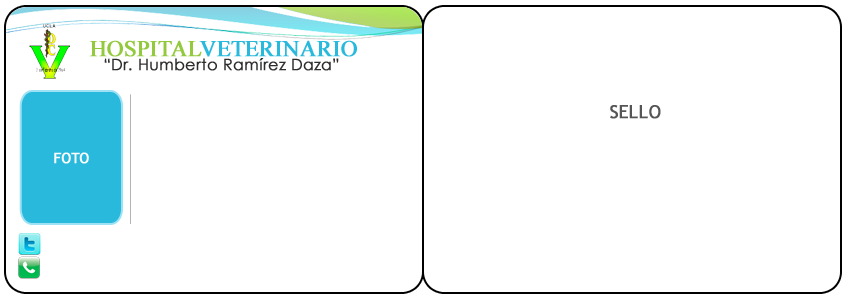
<style>
.page{position:relative;width:848px;height:299px;background:#ffffff}
.page>*{position:absolute;margin:0}
.t1{font:22.7px "TimesNewRomanPSMT";color:#29b9dd;font-weight:bold}
.t2{font:22.7px "TimesNewRomanPSMT";color:#93c93d;font-weight:bold}
.t3{font:15.6px "CenturyGothic";color:#2e2e2e;font-weight:bold}
.t4{font:18px "TrebuchetMS";color:#555555;font-weight:bold}
.t5{font:14.2px "TrebuchetMS";color:#ffffff;font-weight:bold}
</style>
<div class="page">
<p class="t1" style="left:89px;top:40px;width:268px;height:17px"><span class="t2">HOSPITAL</span>VETERINARIO</p>
<p class="t3" style="left:104px;top:58px;width:235px;height:13px">“Dr. Humberto Ramírez Daza”</p>
<p class="t4" style="left:610px;top:105px;width:51px;height:14px">SELLO</p>
<p class="t5" style="left:54px;top:152px;width:35px;height:12px">FOTO</p>
</div>
